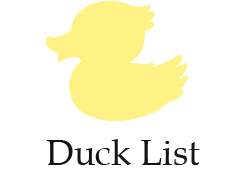
<style>
.page{position:relative;width:239px;height:173px;background:#ffffff}
.page>*{position:absolute;margin:0}
.t1{font:36px "BookAntiqua";color:#141412}
</style>
<div class="page">
<p class="t1" style="left:46px;top:139px;width:154px;height:26px">Duck List</p>
</div>
